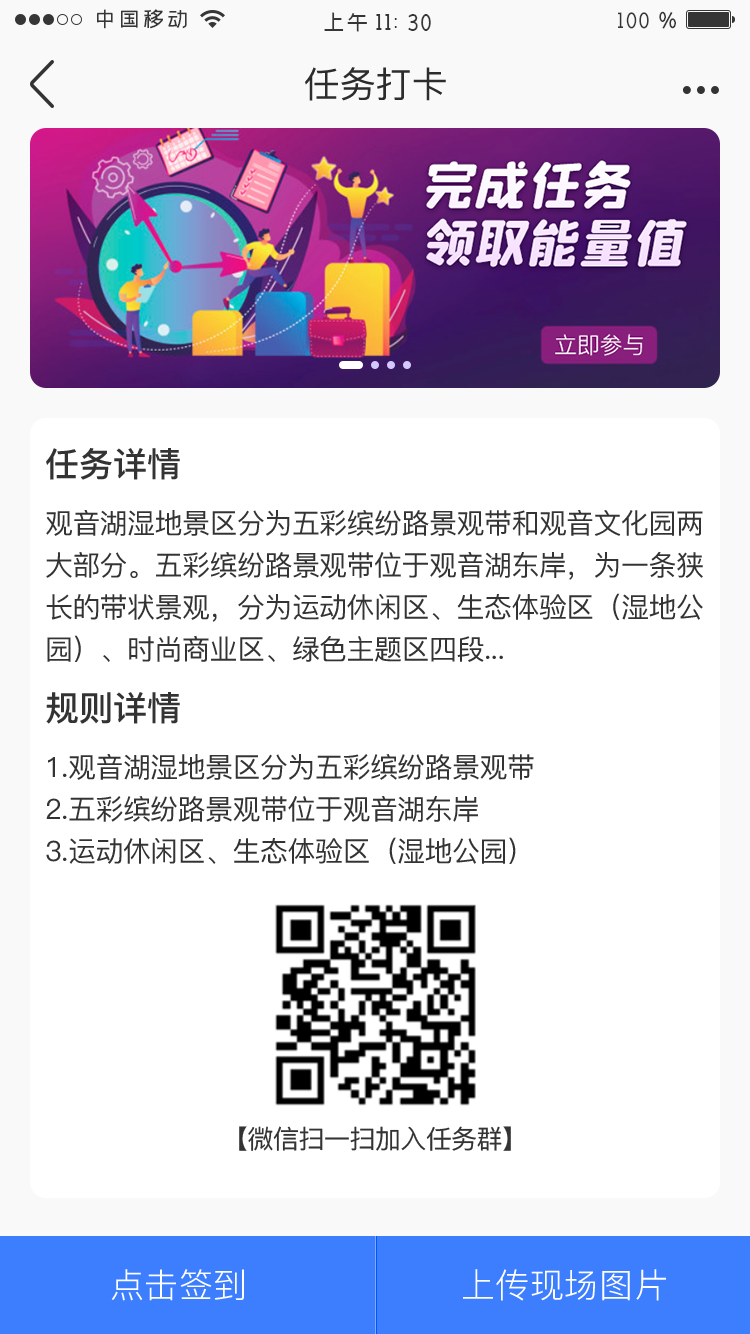
<style>
.page{position:relative;width:750px;height:1334px;background:#ffffff}
.page>*{position:absolute;margin:0}
.t1{font:36px "PingFang-SC-Medium";color:#2c2c2c;text-transform:uppercase}
.t2{font:34px "PingFang-SC-Bold";color:#333333}
.t3{font:28px/42px "PingFang-SC-Medium";letter-spacing:-0.02em;color:#333333}
.t4{font:26px "PingFang-SC-Medium";letter-spacing:-0.02em;color:#333333}
.t5{font:34px "PingFang-SC-Regular";letter-spacing:0.015em;color:#ffffff}
</style>
<div class="page">
<p class="t1" style="left:305px;top:67px;width:141px;height:34px">任务打卡</p>
<p class="t2" style="left:46px;top:448px;width:134px;height:32px">任务详情</p>
<p class="t3" style="left:46px;top:510px;width:657px;height:152px">观音湖湿地景区分为五彩缤纷路景观带和观音文化园两大部分。五彩缤纷路景观带位于观音湖东岸，为一条狭长的带状景观，分为运动休闲区、生态体验区（湿地公园）、时尚商业区、绿色主题区四段...</p>
<p class="t2" style="left:46px;top:692px;width:134px;height:32px">规则详情</p>
<p class="t3" style="left:46px;top:754px;width:488px;height:110px">1.观音湖湿地景区分为五彩缤纷路景观带<br>2.五彩缤纷路景观带位于观音湖东岸<br>3.运动休闲区、生态体验区（湿地公园）</p>
<p class="t4" style="left:239px;top:1126px;width:272px;height:25px">【微信扫一扫加入任务群】</p>
<p class="t5" style="left:111px;top:1269px;width:133px;height:32px">点击签到</p>
<p class="t5" style="left:463px;top:1269px;width:203px;height:32px">上传现场图片</p>
</div>
